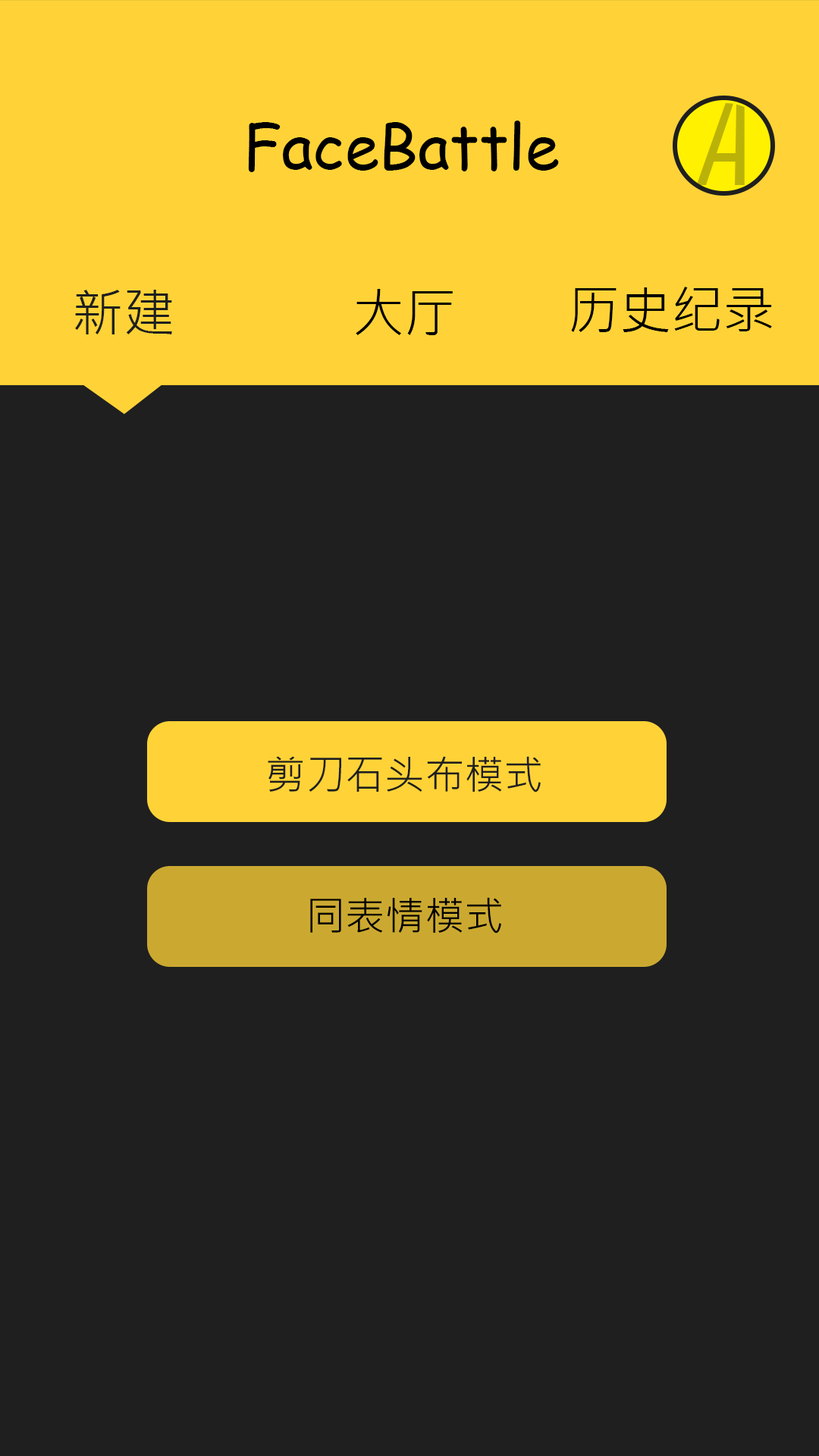
<style>
.page{position:relative;width:819px;height:1456px;background:#1f1f1f}
.page>*{position:absolute;margin:0}
.t1{font:62.1px "ComicSansMS";color:#000000}
.t2{font:51.6px "MicrosoftJhengHeiRegular";color:#1f1f1f}
.t3{font:51.6px "MicrosoftJhengHeiRegular";color:#000000}
.t4{font:39.6px "MicrosoftJhengHeiRegular";color:#1f1f1f}
.t5{font:39.6px "MicrosoftJhengHeiRegular";color:#000000}
</style>
<div class="page">
<p class="t1" style="left:248px;top:121px;width:311px;height:51px">FaceBattle</p>
<p class="t2" style="left:75px;top:290px;width:97px;height:44px">新建</p>
<p class="t3" style="left:356px;top:289px;width:97px;height:46px">大厅</p>
<p class="t3" style="left:571px;top:287px;width:201px;height:45px">历史纪录</p>
<p class="t4" style="left:268px;top:756px;width:273px;height:36px">剪刀石头布模式</p>
<p class="t5" style="left:310px;top:897px;width:191px;height:36px">同表情模式</p>
</div>
